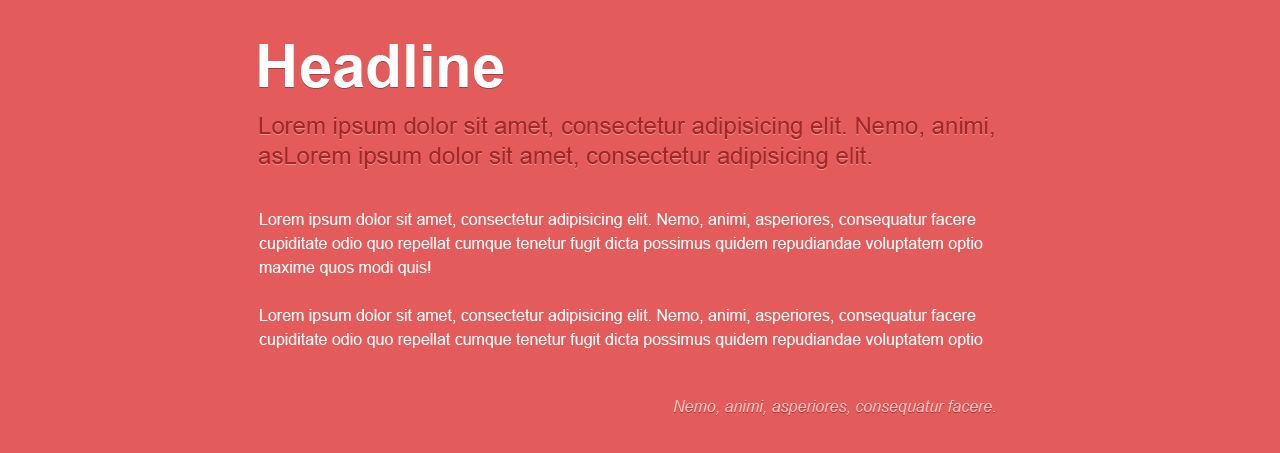
<style>
.page{position:relative;width:1280px;height:453px;background:#e35b5b}
.page>*{position:absolute;margin:0}
.t1{font:60px "Arial-BoldMT";color:#ffffff}
.t2{font:24px/30px "ArialMT";color:#a42727}
.t3{font:16px/24px "ArialMT";color:#ffffff}
.t4{font:16px "Arial-ItalicMT";color:#ffbfbf}
</style>
<div class="page">
<p class="t1" style="left:259px;top:44px;width:245px;height:44px">Headline</p>
<p class="t2" style="left:258px;top:116px;width:736px;height:53px">Lorem ipsum dolor sit amet, consectetur adipisicing elit. Nemo, animi, asLorem ipsum dolor sit amet, consectetur adipisicing elit.</p>
<p class="t3" style="left:259px;top:213px;width:724px;height:135px">Lorem ipsum dolor sit amet, consectetur adipisicing elit. Nemo, animi, asperiores, consequatur facere cupiditate odio quo repellat cumque tenetur fugit dicta possimus quidem repudiandae voluptatem optio maxime quos modi quis!<br><br>Lorem ipsum dolor sit amet, consectetur adipisicing elit. Nemo, animi, asperiores, consequatur facere cupiditate odio quo repellat cumque tenetur fugit dicta possimus quidem repudiandae voluptatem optio maxime quos modi quis!</p>
<p class="t4" style="left:673px;top:400px;width:322px;height:15px">Nemo, animi, asperiores, consequatur facere.</p>
</div>
